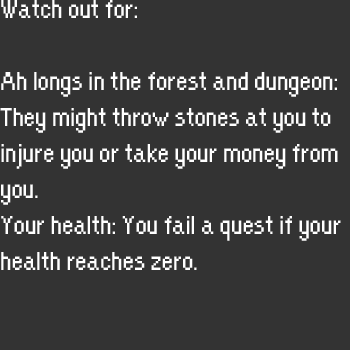
<style>
.page{position:relative;width:350px;height:350px;background:#333333}
.page>*{position:absolute;margin:0}
.t1{font:30px "OrangeKid-Regular";color:#ffffff}
</style>
<div class="page">
<p class="t1" style="left:0px;top:0px;width:341px;height:270px">Watch out for: <br><br>Ah longs in the forest and dungeon: <br>They might throw stones at you to <br>injure you or take your money from <br>you.<br>Your health: You fail a quest if your <br>health reaches zero.</p>
</div>
